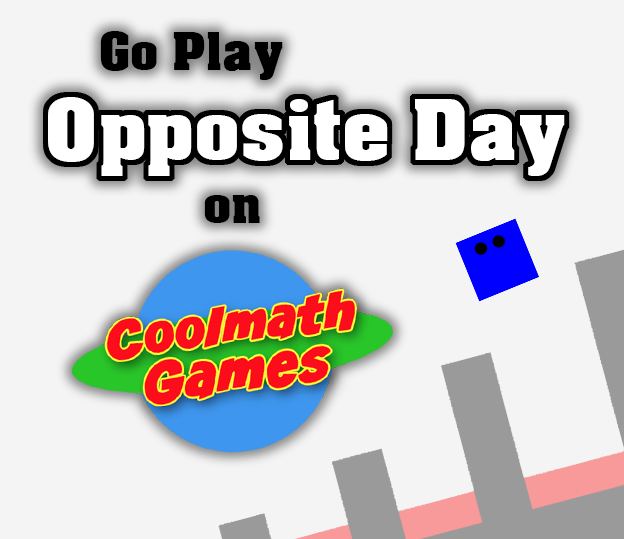
<style>
.page{position:relative;width:624px;height:539px;background:#f4f4f4}
.page>*{position:absolute;margin:0}
.t1{font:50px "AcmeFont";color:#000000}
.t2{font:80.8px "AcmeFont";color:#ffffff}
</style>
<div class="page">
<p class="t1" style="left:100px;top:31px;width:183px;height:49px">Go Play</p>
<p class="t2" style="left:48px;top:97px;width:517px;height:79px">Opposite Day</p>
<p class="t1" style="left:204px;top:195px;width:56px;height:28px">on</p>
</div>
